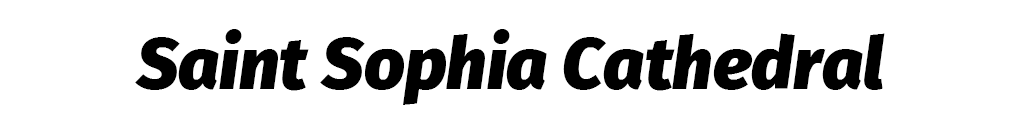
<style>
.page{position:relative;width:1024px;height:128px;background:#ffffff}
.page>*{position:absolute;margin:0}
.t1{font:71.8px "FiraSans-BlackItalic";color:#000000}
</style>
<div class="page">
<p class="t1" style="left:135px;top:29px;width:750px;height:76px">Saint Sophia Cathedral</p>
</div>
